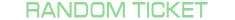
<style>
.page{position:relative;width:235px;height:20px;background:#ffffff}
.page>*{position:absolute;margin:0}
.t1{font:23px "MicrogrammaD-MediExte";letter-spacing:0.075em;color:#94d898;font-weight:bold;scale:0.7 1}
</style>
<div class="page">
<p class="t1" style="left:26px;top:2px;width:182px;height:16px">RANDOM TICKET</p>
</div>
